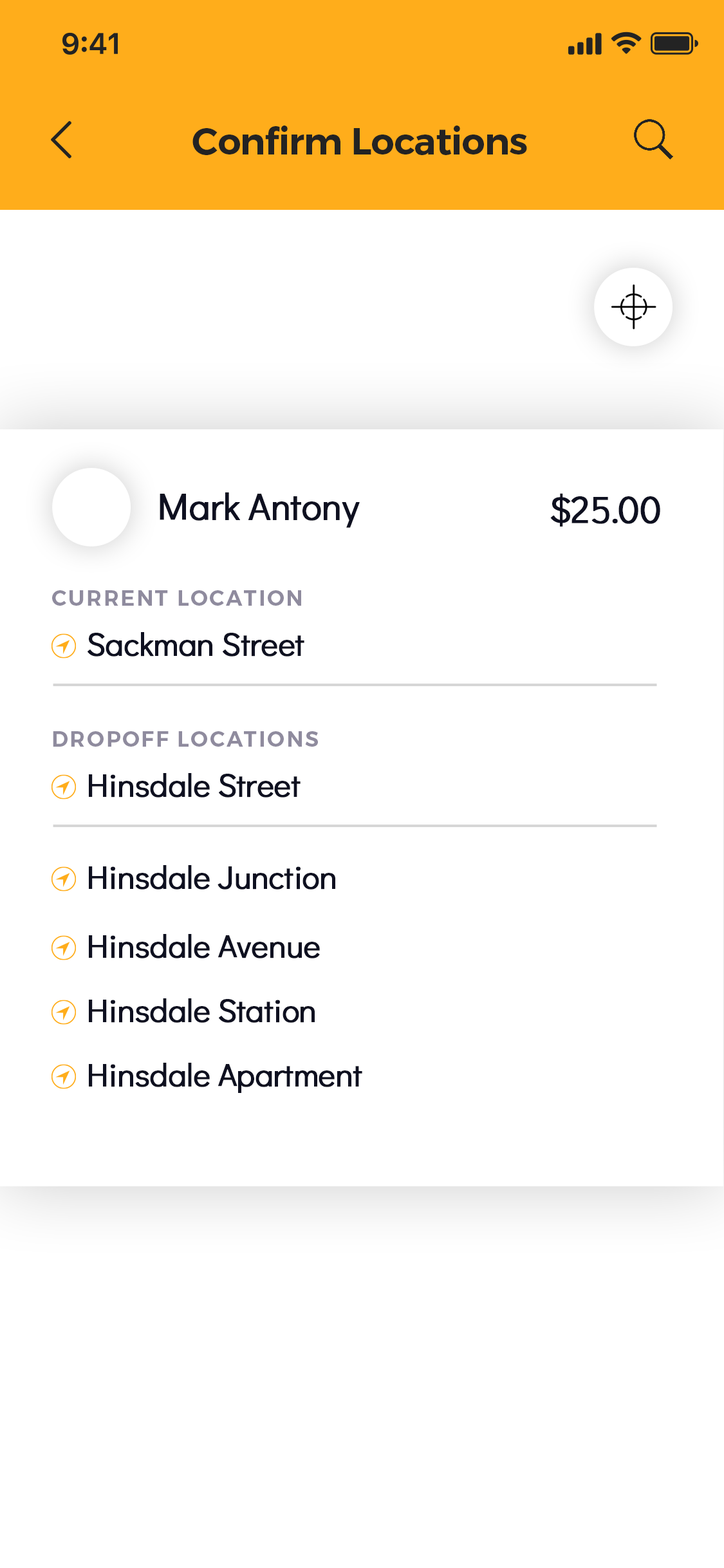
<style>
.page{position:relative;width:724px;height:1568px;background:#ffffff}
.page>*{position:absolute;margin:0}
.t1{font:37.5px "Montserrat-SemiBold";letter-spacing:-0.02em;color:#232323}
.t2{font:37.5px "DidactGothic-Regular";letter-spacing:-0.02em;color:#0e1020;font-weight:bold}
.t3{font:21.5px "Montserrat-SemiBold";letter-spacing:0.08em;color:#8f8b9e;text-transform:uppercase}
.t4{font:32.2px "DidactGothic-Regular";letter-spacing:-0.02em;color:#0e1020;font-weight:bold}
</style>
<div class="page">
<p class="t1" style="left:192px;top:126px;width:335px;height:29px">Confirm Locations</p>
<p class="t2" style="left:160px;top:492px;width:200px;height:36px">Mark Antony</p>
<p class="t2" style="left:550px;top:493px;width:110px;height:34px">$25.00</p>
<p class="t3" style="left:52px;top:590px;width:249px;height:16px">Current location</p>
<p class="t4" style="left:88px;top:632px;width:216px;height:25px">Sackman Street</p>
<p class="t3" style="left:53px;top:731px;width:265px;height:16px">DROPOFF LOCATIONS</p>
<p class="t4" style="left:89px;top:773px;width:212px;height:25px">Hinsdale Street</p>
<p class="t4" style="left:89px;top:865px;width:246px;height:25px">Hinsdale Junction</p>
<p class="t4" style="left:89px;top:934px;width:231px;height:24px">Hinsdale Avenue</p>
<p class="t4" style="left:89px;top:998px;width:226px;height:25px">Hinsdale Station</p>
<p class="t4" style="left:89px;top:1063px;width:273px;height:30px">Hinsdale Apartment</p>
</div>
